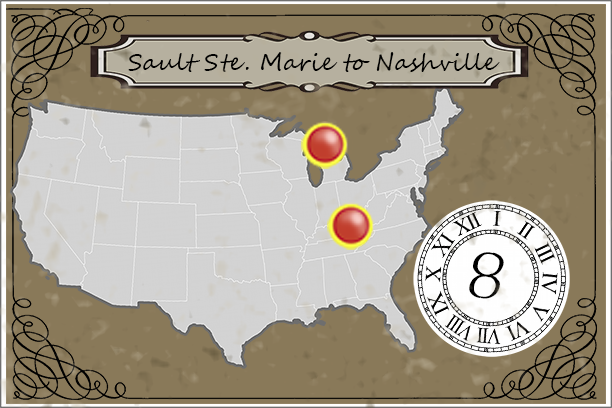
<style>
.page{position:relative;width:612px;height:408px;background:#897959}
.page>*{position:absolute;margin:0}
.t1{font:23.4px "SegoeScript";color:#000000}
.t2{font:68.4px "TempusSansITC";color:#000000}
</style>
<div class="page">
<p class="t1" style="left:128px;top:52px;width:372px;height:20px">Sault Ste. Marie to Nashville</p>
<p class="t2" style="left:469px;top:252px;width:35px;height:47px;rotate:10deg">8</p>
</div>
